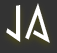
<style>
.page{position:relative;width:57px;height:53px;background:#333333}
.page>*{position:absolute;margin:0}
.t1{font:50px "Xtra";color:#ffffff}
</style>
<div class="page">
<p class="t1" style="left:6px;top:3px;width:44px;height:40px">Ja</p>
</div>
